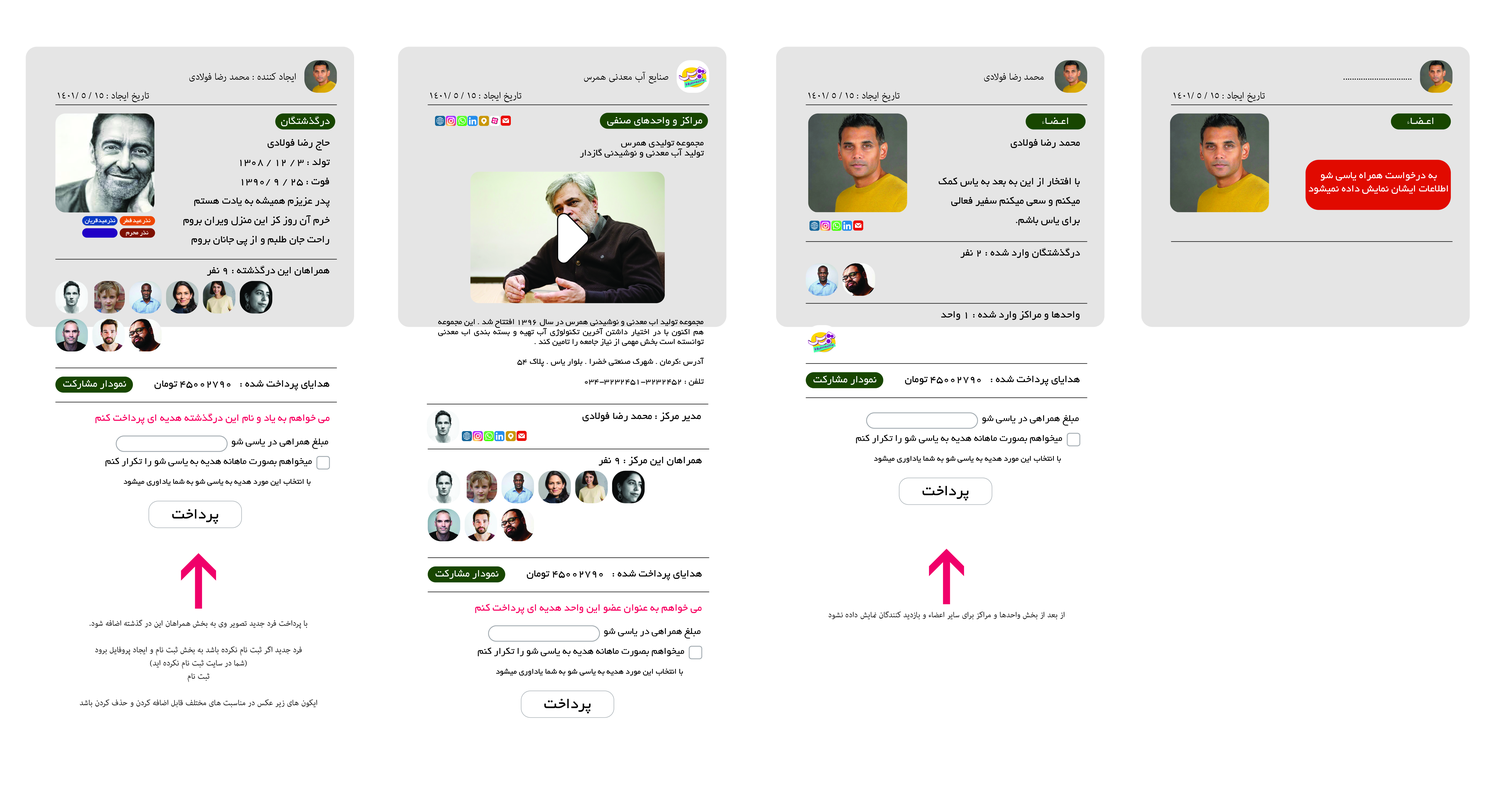
<style>
.page{position:relative;width:1508px;height:791px;background:#ffffff}
.page>*{position:absolute;margin:0}
.t1{font:13.2px "AdobeArabic-Regular";color:#000000}
.t2{font:11.2px "BYekan";color:#ffffff}
.t3{font:11.1px/19.4px "BYekan";color:#000000}
.t4{font:8.8px/9.9px "BYekan";color:#000000}
.t5{font:9.9px/9.9px "BYekan";color:#000000}
.t6{font:11px "BYekan";color:#ffffff}
.t7{font:6.6px "BYekan";letter-spacing:-0.05em;color:#ffffff}
.t8{font:6.6px "BYekan";letter-spacing:-0.03em;color:#ffffff}
.t9{font:6.6px "BYekan";color:#ffffff}
.t10{font:11.1px "BYekan";color:#000000}
.t11{font:11.1px "BYekan";color:#f80061}
.t12{font:10.3px/19.8px "BYekan";color:#000000}
.t13{font:8.6px/19.8px "BYekan";color:#000000}
.t14{font:16.4px "BYekan";color:#000000}
.t15{font:11px "AdobeArabic-Regular";color:#000000}
</style>
<div class="page">
<p class="t1" style="left:189px;top:73px;width:107px;height:9px">ایجاد کننده : محمد رضا فولادی</p>
<p class="t1" style="left:584px;top:72px;width:84px;height:12px">صنایع آب معدنی همرس</p>
<p class="t1" style="left:984px;top:73px;width:60px;height:9px">محمد رضا فولادی</p>
<p class="t1" style="left:1343px;top:78px;width:68px;height:2px">...............................</p>
<p class="t1" style="left:58px;top:92px;width:91px;height:10px">تاریخ ایجاد : 15 / 5 /1401</p>
<p class="t1" style="left:430px;top:92px;width:91px;height:10px">تاریخ ایجاد : 15 / 5 /1401</p>
<p class="t1" style="left:808px;top:92px;width:91px;height:10px">تاریخ ایجاد : 15 / 5 /1401</p>
<p class="t1" style="left:1173px;top:92px;width:92px;height:10px">تاریخ ایجاد : 15 / 5 /1401</p>
<p class="t2" style="left:281px;top:116px;width:49px;height:10px">درگذشتگان</p>
<p class="t2" style="left:607px;top:117px;width:95px;height:9px">مراکز و واحدهای صنفی</p>
<p class="t2" style="left:1042px;top:118px;width:26px;height:6px">اعـضـاء</p>
<p class="t2" style="left:1407px;top:118px;width:26px;height:6px">اعـضـاء</p>
<p class="t3" style="left:183px;top:139px;width:147px;height:107px">حاج رضا فولادی <br>تولد : 3 / 12 / 1308 <br>فوت : 25 / 9 /1390  <br>پدر عزیزم همیشه به یادت هستم<br>خرم آن روز کز این منزل ویران بروم<br>راحت جان طلبم و از پی جانان بروم</p>
<p class="t4" style="left:438px;top:140px;width:266px;height:246px"><span class="t5">مجموعه تولیدی همرس<br>تولید آب معدنی و نوشیدنی گازدار<br><br><br><br><br><br><br><br><br><br><br><br><br><br><br><br><br></span>مجموعه تولید اب معدنی و نوشیدنی همرس در سال 1396 افتتاح شد . این مجموعه هم اکنون با در اختیار داشتن آخرین تکنولوژی آب تهیه و بسته بندی اب معدنی توانسته است بخش مهمی از نیاز جامعه را تامین کند .<br><br>آدرس :کرمان . شهرک صنعتی خضرا . بلوار یاس . پلاک ۵۴<br><br>تلفن : 034-3232451-3232452</p>
<p class="t3" style="left:938px;top:139px;width:142px;height:86px">محمد رضا فولادی <br><br>با افتخار از این به بعد به یاس کمک<br>میکنم و سعی میکنم سفیر فعالی <br>برای یاس باشم.</p>
<p class="t6" style="left:1308px;top:172px;width:140px;height:22px;text-align:center">به درخواست همراه یاسی شو<br>اطلاعات ایشان نمایش داده نمیشود</p>
<p class="t7" style="left:85px;top:218px;width:30px;height:6px">نذر عید قریان</p>
<p class="t8" style="left:123px;top:218px;width:27px;height:6px">نذر عید فطر</p>
<p class="t9" style="left:126px;top:231px;width:22px;height:5px">نذر محرم</p>
<p class="t10" style="left:960px;top:248px;width:120px;height:10px">درگذشتگان وارد شده : 2 نفر</p>
<p class="t10" style="left:207px;top:266px;width:122px;height:10px">همراهان این درگذشته : 9 نفر</p>
<p class="t10" style="left:941px;top:311px;width:138px;height:9px">واحدها و مراکز وارد شده : 1 واحد</p>
<p class="t2" style="left:813px;top:375px;width:63px;height:10px">نمودار مشارکت</p>
<p class="t10" style="left:905px;top:376px;width:175px;height:10px">هدایای پرداخت شده :   45002790 تومان</p>
<p class="t2" style="left:63px;top:380px;width:63px;height:9px">نمودار مشارکت</p>
<p class="t10" style="left:154px;top:380px;width:175px;height:10px">هدایای پرداخت شده :   45002790 تومان</p>
<p class="t11" style="left:95px;top:413px;width:234px;height:11px">می خواهم به یاد و نام این درگذشته هدیه ای پرداخت کنم</p>
<p class="t10" style="left:582px;top:412px;width:119px;height:9px">مدیر مرکز : محمد رضا فولادی</p>
<p class="t12" style="left:856px;top:415px;width:222px;height:48px">مبلغ همراهی در یاسی شو<br>       میخواهم بصورت ماهانه هدیه به یاسی شو را تکرار کنم <br><span class="t13">         با انتخاب این مورد هدیه به یاسی شو به شما یاداوری میشود</span></p>
<p class="t12" style="left:105px;top:438px;width:223px;height:48px">مبلغ همراهی در یاسی شو<br>       میخواهم بصورت ماهانه هدیه به یاسی شو را تکرار کنم <br><span class="t13">         با انتخاب این مورد هدیه به یاسی شو به شما یاداوری میشود</span></p>
<p class="t10" style="left:598px;top:456px;width:104px;height:9px">همراهان این مرکز : 9 نفر</p>
<p class="t14" style="left:922px;top:486px;width:46px;height:14px">پرداخت</p>
<p class="t14" style="left:172px;top:509px;width:46px;height:15px">پرداخت</p>
<p class="t2" style="left:435px;top:570px;width:63px;height:9px">نمودار مشارکت</p>
<p class="t10" style="left:527px;top:570px;width:175px;height:10px">هدایای پرداخت شده :   45002790 تومان</p>
<p class="t11" style="left:475px;top:604px;width:226px;height:10px">می خواهم به عنوان عضو این واحد هدیه ای پرداخت کنم</p>
<p class="t15" style="left:829px;top:611px;width:235px;height:8px">از بعد از بخش واحدها و مراکز برای سایر اعضاء و بازدید کنندگان نمایش داده نشود</p>
<p class="t15" style="left:80px;top:619px;width:237px;height:88px;text-align:center">با پرداخت فرد جدید تصویر وی به بخش همراهان این در گذشته اضافه شود.<br><br>فرد جدید اگر ثبت نام نکرده باشد به بخش ثبت نام و ایجاد پروفایل برود<br>(شما در سایت ثبت نام نکرده اید)<br>ثبت نام<br><br>ایکون های زیر عکس در مناسبت های مختلف قابل اضافه کردن و حذف کردن باشد</p>
<p class="t12" style="left:478px;top:628px;width:222px;height:47px">مبلغ همراهی در یاسی شو<br>       میخواهم بصورت ماهانه هدیه به یاسی شو را تکرار کنم <br><span class="t13">         با انتخاب این مورد هدیه به یاسی شو به شما یاداوری میشود</span></p>
<p class="t14" style="left:544px;top:699px;width:46px;height:14px">پرداخت</p>
</div>
